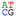
<style>
.page{position:relative;width:16px;height:16px;background:#ffffff}
.page>*{position:absolute;margin:0}
.t1{font:10px "CourierNewPSMT";color:#10900c}
.t2{font:10px "CourierNewPSMT";color:#ff0000}
.t3{font:10px "CourierNewPSMT"}
</style>
<div class="page">
<p class="t1" style="left:1px;top:1px;width:13px;height:7px">A<span class="t2">T</span></p>
<p class="t3" style="left:2px;top:9px;width:12px;height:7px">CG</p>
</div>
